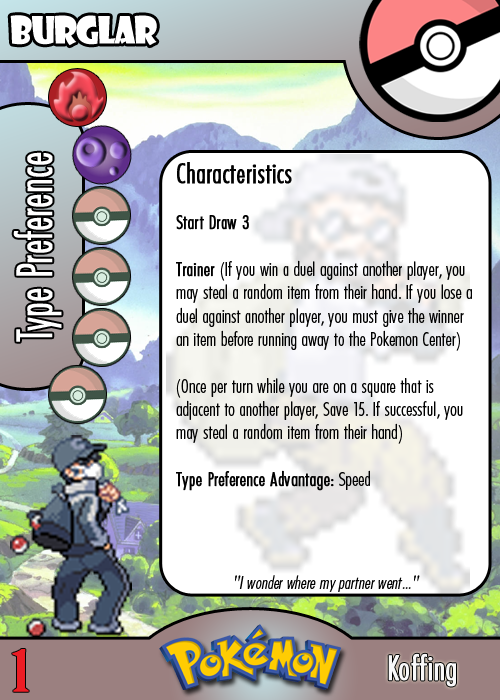
<style>
.page{position:relative;width:500px;height:700px}
.page>*{position:absolute;margin:0}
.t1{font:36.7px "ShowcardGothic-Reg";letter-spacing:-0.025em;color:#ffffff;scale:0.91 1}
.t2{font:46.7px "Futura-CondensedLight";color:#ffffff;font-weight:bold;scale:0.83 1}
.t3{font:19.4px "FuturaCondensedBQ-Light";color:#010101}
.t4{font:27.8px "FuturaCondensedBQ-Light";color:#010101;font-weight:bold}
.t5{font:19.4px "FuturaCondensedBQ-Light";color:#010101;font-weight:bold}
.t6{font:18.1px "FuturaCondensedBQ-Light";color:#010101;font-style:italic}
.t7{font:55.6px "BirchStd";color:#ed1c24;font-weight:bold;scale:1.5 1}
.t8{font:34.5px "FuturaCondensedBQ-Light";color:#f9f9f9;font-weight:bold}
</style>
<div class="page">
<p class="t1" style="left:10px;top:15px;width:147px;height:31px">Burglar</p>
<p class="t2" style="left:13px;top:152px;width:49px;height:190px;rotate:-90deg">Type Preference</p>
<p class="t3" style="left:176px;top:162px;width:296px;height:329px"><span class="t4">Characteristics<br></span><span class="t5"><br>Start Draw 3<br><br>Trainer </span>(If you win a duel against another player, you may steal a random item from their hand. If you lose a duel against another player, you must give the winner an item before running away to the Pokemon Center)<br><br>(Once per turn while you are on a square that is adjacent to another player, Save 15. If successful, you may steal a random item from their hand)<br><br><span class="t5">Type Preference Advantage:</span> Speed</p>
<p class="t6" style="left:235px;top:575px;width:185px;height:17px">"I wonder where my partner went..."</p>
<p class="t7" style="left:12px;top:649px;width:17px;height:43px">1</p>
<p class="t8" style="left:388px;top:653px;width:68px;height:34px">Koffing</p>
</div>
